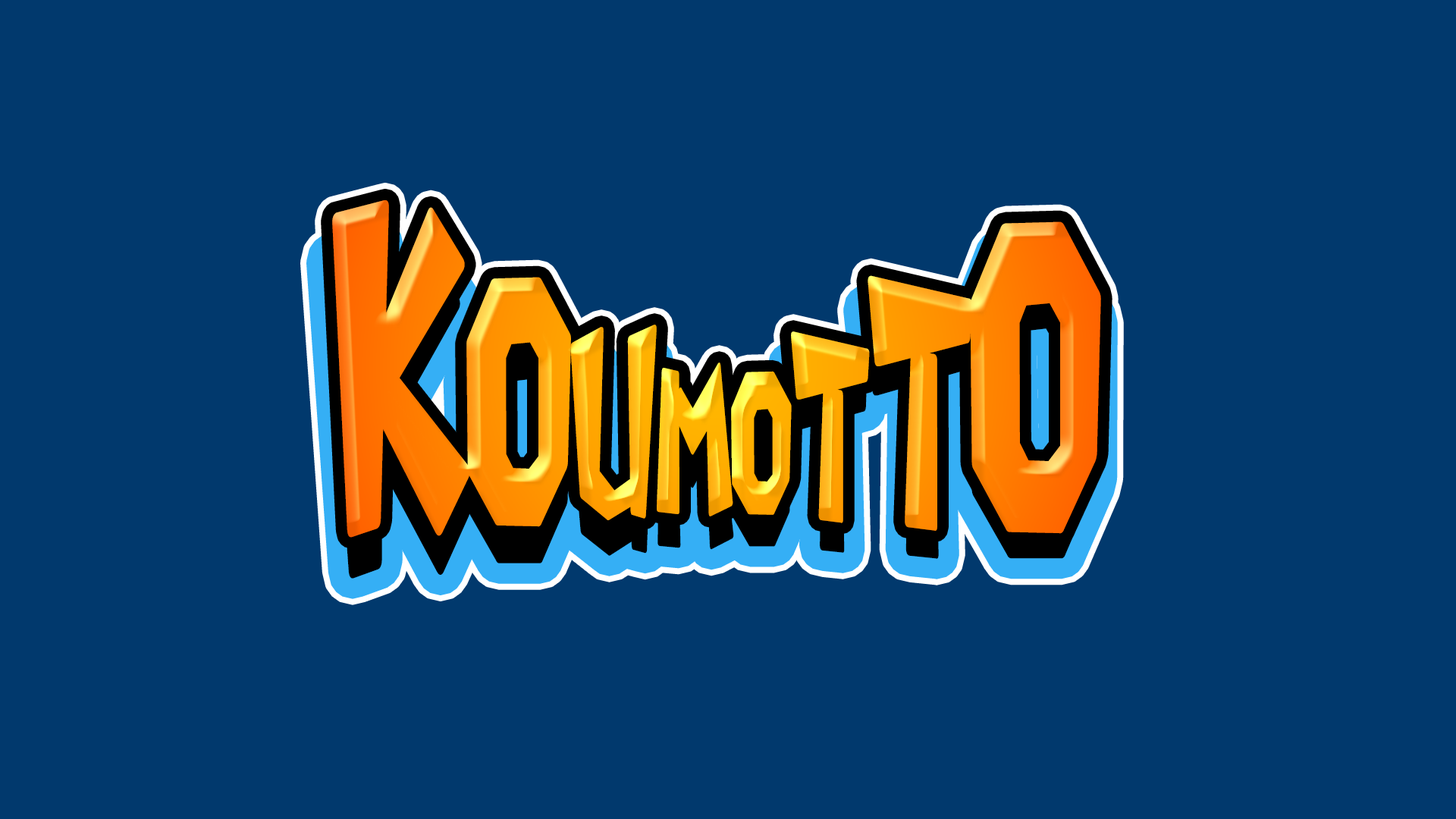
<style>
.page{position:relative;width:1456px;height:819px;background:#01396d}
.page>*{position:absolute;margin:0}
.t1{font:174.4px "AnnyantRoman";scale:0.53 1}
.t2{font:379.2px "AnnyantRoman";scale:0.53 1}
.t3{font:303.3px "AnnyantRoman";scale:0.53 1}
.t4{font:227.5px "AnnyantRoman";scale:0.53 1}
</style>
<div class="page">
<p class="t1" style="left:332px;top:200px;width:769px;height:338px"><span class="t2">K</span><span class="t3">O</span><span class="t4">U</span>MO<span class="t4">T</span><span class="t3">T</span><span class="t2">O</span></p>
<p class="t1" style="left:327px;top:240px;width:770px;height:339px;rotate:-1deg"><span class="t2">K</span><span class="t3">O</span><span class="t4">U</span>MO<span class="t4">T</span><span class="t3">T</span><span class="t2">O</span></p>
</div>
